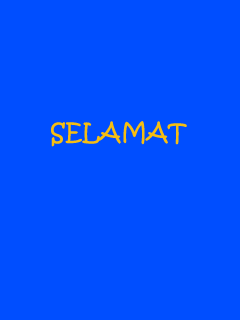
<style>
.page{position:relative;width:240px;height:320px;background:#004eff}
.page>*{position:absolute;margin:0}
.t1{font:24px "KristenITC-Regular";color:#f6be11}
</style>
<div class="page">
<p class="t1" style="left:51px;top:121px;width:136px;height:26px">SELAMAT</p>
</div>
